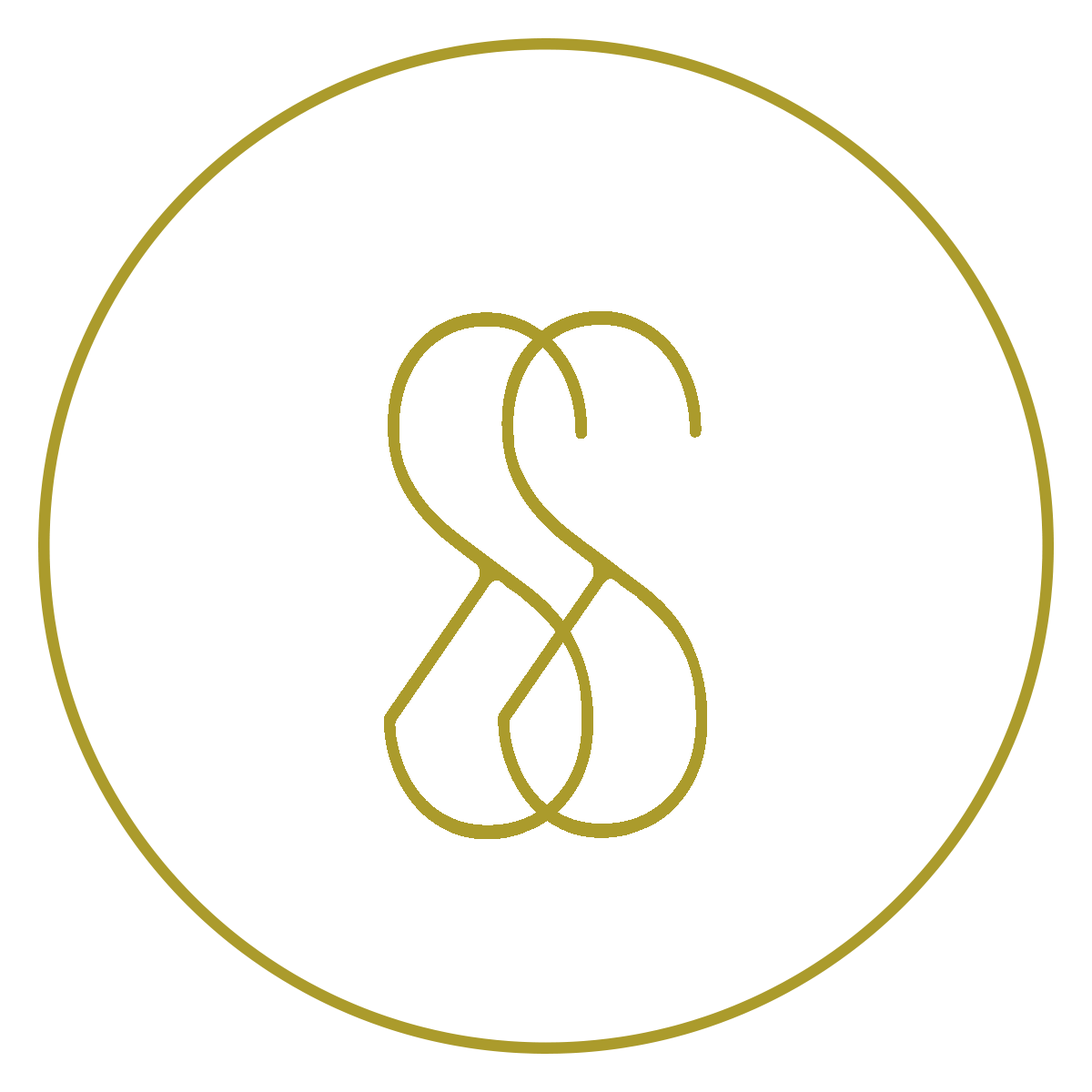
<style>
.page{position:relative;width:1092px;height:1092px;background:#ffffff}
.page>*{position:absolute;margin:0}
.t1{font:808.1px "CrossedType-Light";letter-spacing:0.24em;color:#ab9b2c;scale:0.78 1}
</style>
<div class="page">
<p class="t1" style="left:384px;top:312px;width:209px;height:527px">S</p>
<p class="t1" style="left:498px;top:311px;width:209px;height:527px">S</p>
</div>
